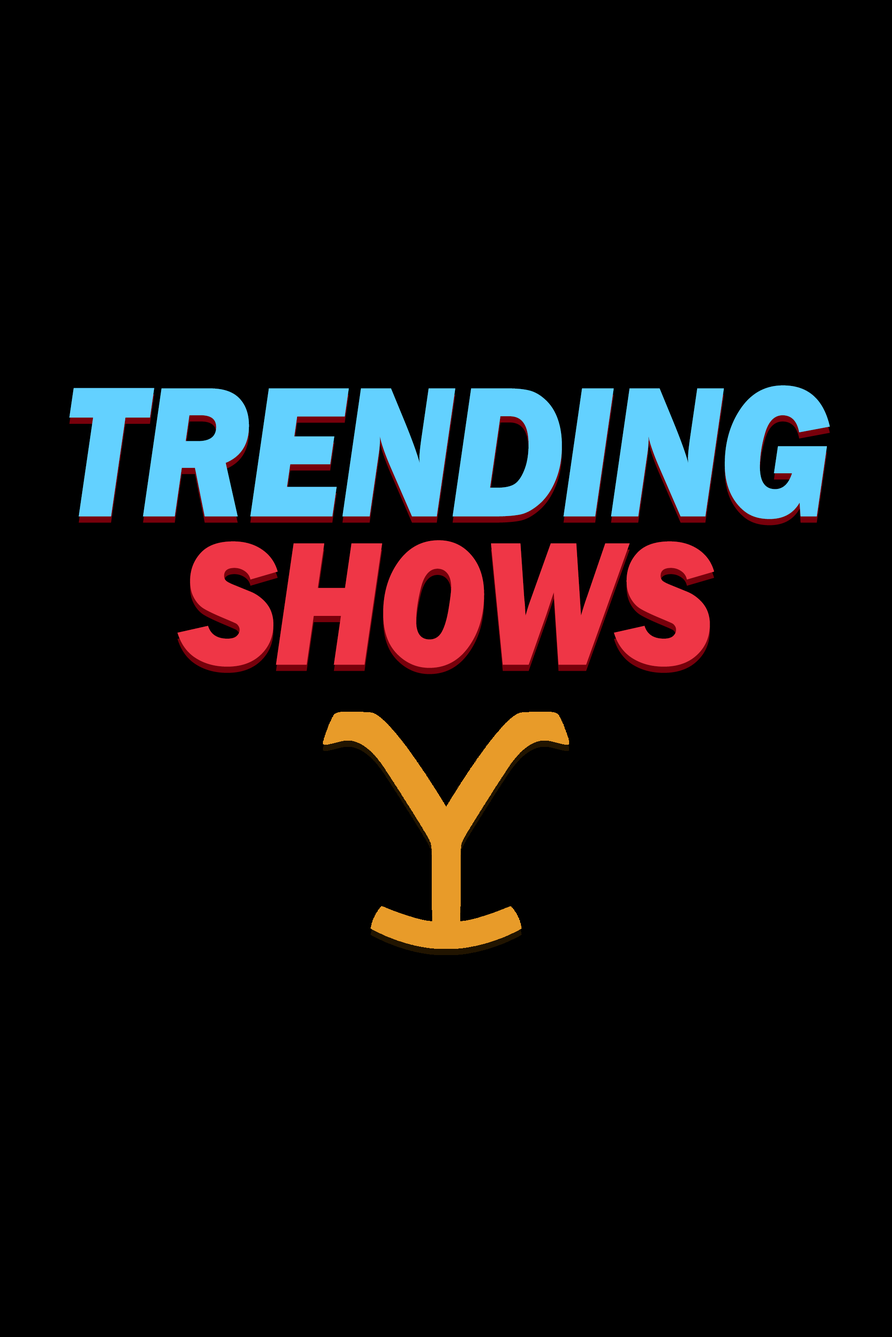
<style>
.page{position:relative;width:892px;height:1337px;background:#000000}
.page>*{position:absolute;margin:0}
.t1{font:191.9px "FranklinGothic-HeavyItalic";letter-spacing:-0.02em;color:#63d1ff;scale:0.87 1}
.t2{font:182px "FranklinGothic-HeavyItalic";letter-spacing:-0.02em;color:#ef3646;scale:0.87 1}
</style>
<div class="page">
<p class="t1" style="left:69px;top:385px;width:761px;height:134px">TRENDING</p>
<p class="t2" style="left:177px;top:540px;width:537px;height:128px">SHOWS</p>
</div>
